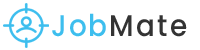
<style>
.page{position:relative;width:200px;height:50px;background:#ffffff}
.page>*{position:absolute;margin:0}
.t1{font:30px "Poppins-Medium";letter-spacing:0.075em;color:#333333;scale:0.93 1}
.t2{font:30px "Poppins-Medium";letter-spacing:0.075em;color:#3dbeee;scale:0.93 1}
</style>
<div class="page">
<p class="t1" style="left:52px;top:13px;width:135px;height:24px"><span class="t2">Job</span>Mate</p>
</div>
